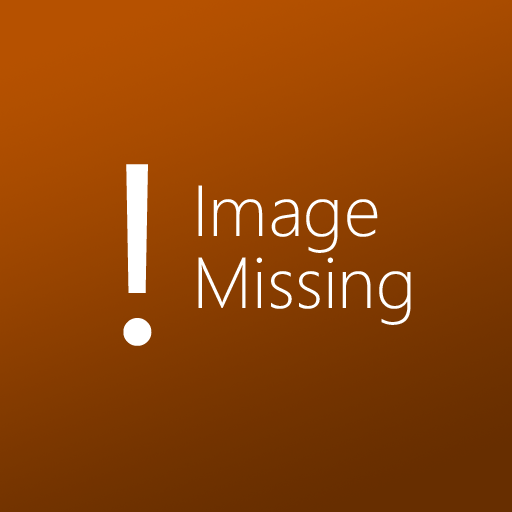
<style>
.page{position:relative;width:512px;height:512px}
.page>*{position:absolute;margin:0}
.t1{font:256px "SegoeWP";color:#ffffff}
.t2{font:72px/72px "SegoeWP-Light";color:#fffefe}
</style>
<div class="page">
<p class="t1" style="left:123px;top:164px;width:29px;height:182px">!</p>
<p class="t2" style="left:198px;top:185px;width:213px;height:140px">Image<br>Missing</p>
</div>
